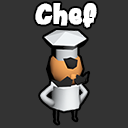
<style>
.page{position:relative;width:128px;height:128px;background:#333333}
.page>*{position:absolute;margin:0}
.t1{font:30px "SPIDERMONKEY";color:#ffffff;font-weight:bold}
</style>
<div class="page">
<p class="t1" style="left:35px;top:3px;width:62px;height:25px">Chef</p>
</div>
